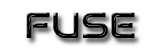
<style>
.page{position:relative;width:162px;height:50px;background:#ffffff}
.page>*{position:absolute;margin:0}
.t1{font:36px "Audiowide-Regular";color:#000000}
</style>
<div class="page">
<p class="t1" style="left:26px;top:12px;width:109px;height:26px">FUSE</p>
</div>
